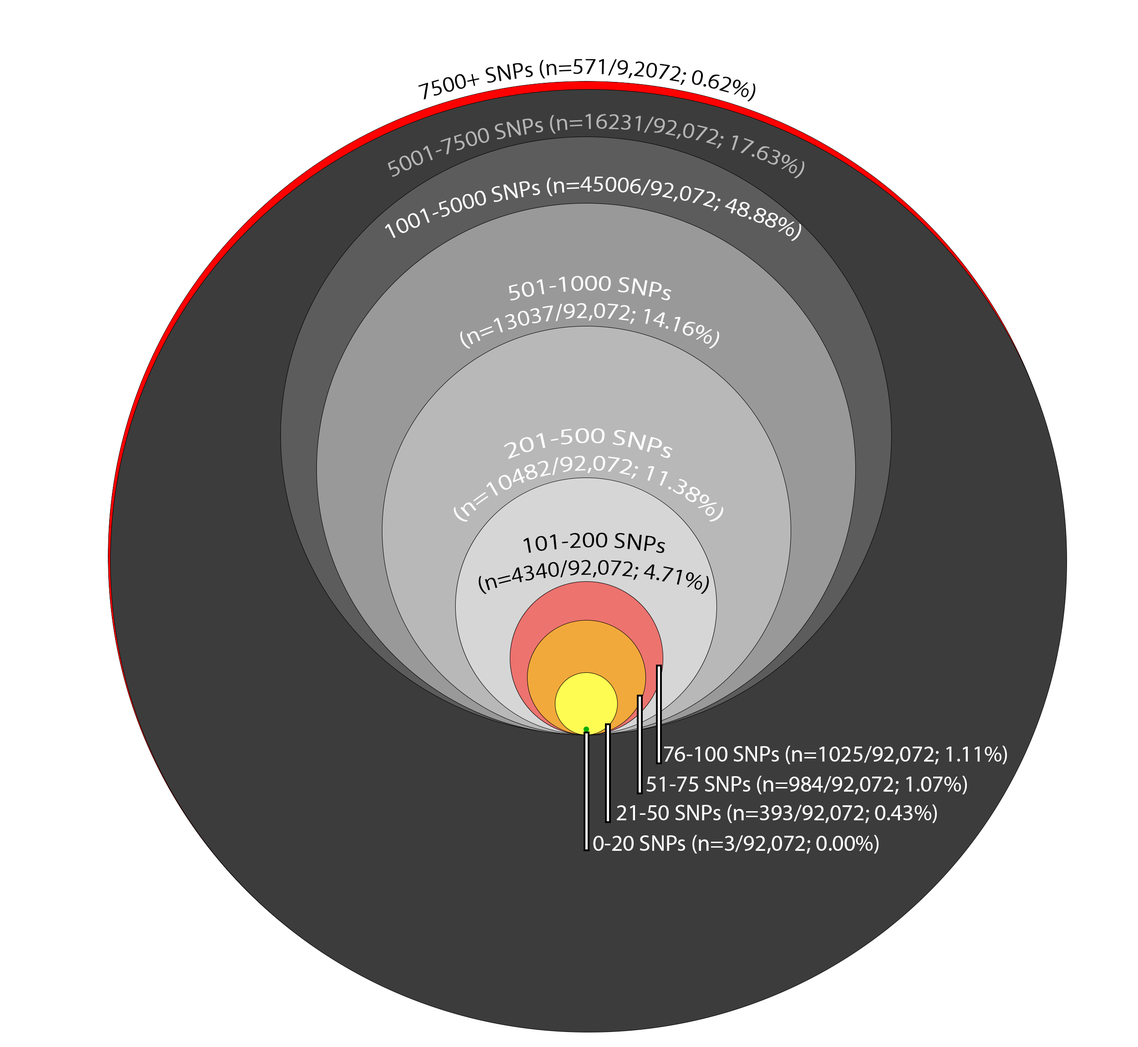
<style>
.page{position:relative;width:1138px;height:1047px;background:#ffffff}
.page>*{position:absolute;margin:0}
.t1{font:22.8px "MyriadPro-Regular";color:#000000}
.t2{font:22.8px "MyriadPro-Regular";color:#b5b5b5}
.t3{font:22.8px "MyriadPro-Regular";color:#ffffff}
</style>
<div class="page">
<p class="t1" style="left:418px;top:59px;width:338px;height:43px;text-align:center">7500+ SNPs (n=571/9,2072; 0.62%)</p>
<p class="t2" style="left:388px;top:114px;width:417px;height:65px;text-align:center">5001-7500 SNPs (n=16231/92,072; 17.63%)</p>
<p class="t3" style="left:385px;top:176px;width:416px;height:65px;text-align:center">1001-5000 SNPs (n=45006/92,072; 48.88%)</p>
<p class="t3" style="left:460px;top:276px;width:260px;height:73px;text-align:center">501-1000 SNPs<br>(n=13037/92,072; 14.16%)</p>
<p class="t3" style="left:454px;top:428px;width:270px;height:94px;text-align:center">201-500 SNPs<br>(n=10482/92,072; 11.38%)</p>
<p class="t1" style="left:479px;top:533px;width:230px;height:61px;text-align:center">101-200 SNPs<br>(n=4340/92,072; 4.71%)</p>
<p class="t3" style="left:664px;top:746px;width:343px;height:19px">76-100 SNPs (n=1025/92,072; 1.11%)</p>
<p class="t3" style="left:647px;top:776px;width:320px;height:19px">51-75 SNPs (n=984/92,072; 1.07%)</p>
<p class="t3" style="left:617px;top:805px;width:320px;height:19px">21-50 SNPs (n=393/92,072; 0.43%)</p>
<p class="t3" style="left:593px;top:835px;width:286px;height:19px">0-20 SNPs (n=3/92,072; 0.00%)</p>
</div>
